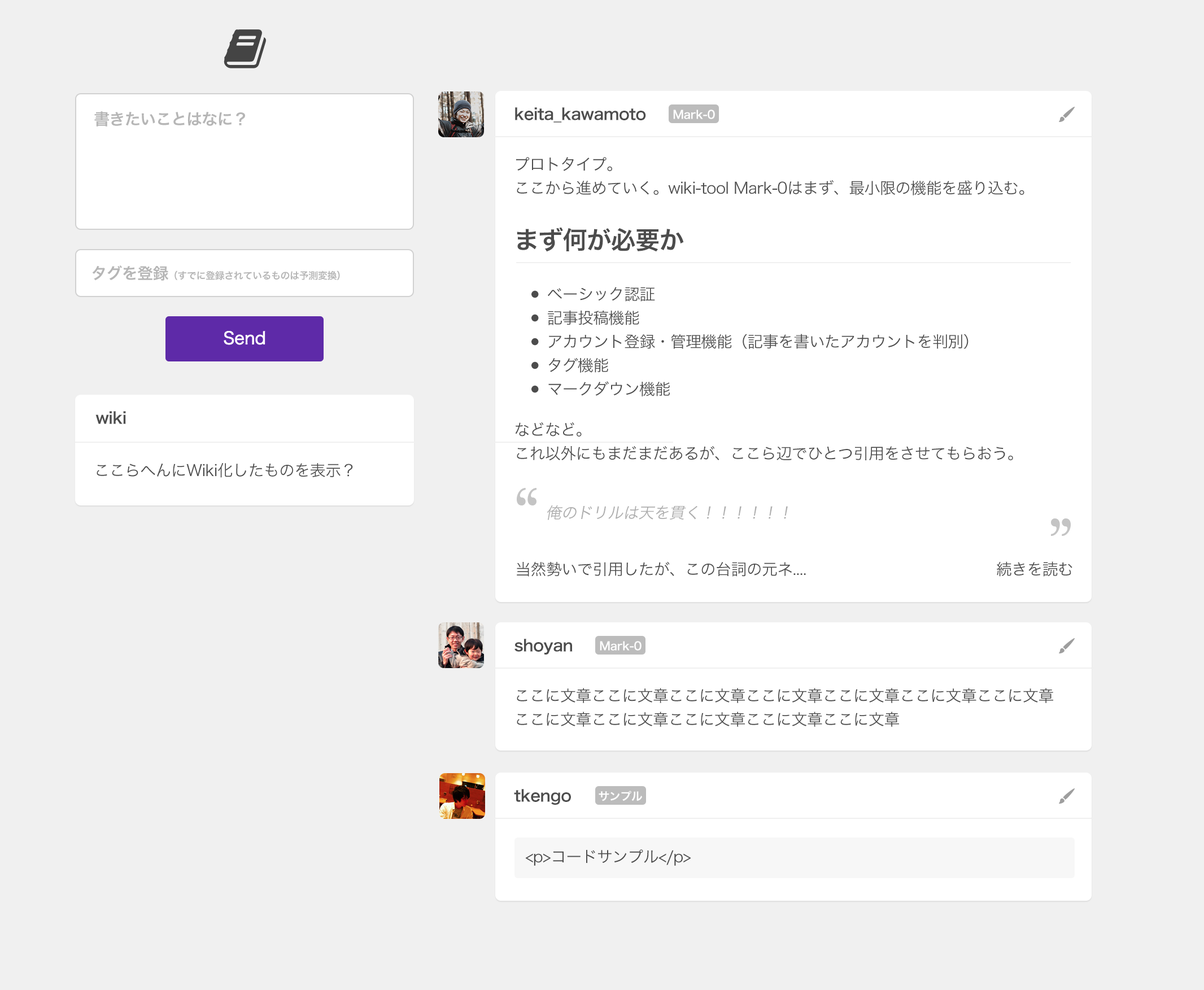
<style>
.page{position:relative;width:1204px;height:990px;background:#f0f0f0}
.page>*{position:absolute;margin:0}
.t1{font:15.8px "HiraKakuPro-W6";letter-spacing:-0.025em;color:#b6b6b6}
.t2{font:15.8px "HiraKakuPro-W6";letter-spacing:-0.025em;color:#4c4c4c}
.t3{font:11.3px "HiraKakuPro-W6";letter-spacing:-0.025em;color:#ffffff}
.t4{font:15.8px/23.7px "HiraKakuPro-W3";letter-spacing:-0.025em;color:#4c4c4c}
.t5{font:24.9px "HiraKakuPro-W6";letter-spacing:-0.025em;color:#4c4c4c}
.t6{font:9.6px "HiraKakuPro-W6";letter-spacing:-0.025em;color:#b6b6b6}
.t7{font:7.9px/23.7px "KozGoPr6N-Regular";letter-spacing:-0.025em;color:#4c4c4c}
.t8{font:15.8px "HiraKakuPro-W3";letter-spacing:-0.025em;color:#4c4c4c}
.t9{font:15.8px "HiraKakuPro-W3";letter-spacing:-0.025em;color:#aeaeae;font-style:italic}
</style>
<div class="page">
<p class="t1" style="left:94px;top:111px;width:151px;height:16px">書きたいことはなに？</p>
<p class="t2" style="left:515px;top:107px;width:131px;height:16px">keita_kawamoto</p>
<p class="t3" style="left:673px;top:110px;width:42px;height:9px">Mark-0</p>
<p class="t4" style="left:516px;top:157px;width:509px;height:38px">プロトタイプ。<br>ここから進めていく。wiki-tool Mark-0はまず、最小限の機能を盛り込む。</p>
<p class="t5" style="left:517px;top:227px;width:167px;height:25px">まず何が必要か</p>
<p class="t6" style="left:92px;top:265px;width:248px;height:16px"><span class="t1">タグを登録</span>（すでに登録されているものは予測変換）</p>
<p class="t4" style="left:532px;top:287px;width:437px;height:110px"><span class="t7">●     </span>ベーシック認証<br><span class="t7">●     </span>記事投稿機能<br><span class="t7">●     </span>アカウント登録・管理機能（記事を書いたアカウントを判別）<br><span class="t7">●     </span>タグ機能<br><span class="t7">●     </span>マークダウン機能</p>
<p class="t2" style="left:95px;top:411px;width:31px;height:13px">wiki</p>
<p class="t4" style="left:515px;top:422px;width:498px;height:39px">などなど。<br>これ以外にもまだまだあるが、ここら辺でひとつ引用をさせてもらおう。</p>
<p class="t8" style="left:97px;top:463px;width:256px;height:15px">ここらへんにWiki化したものを表示？</p>
<p class="t9" style="left:547px;top:505px;width:241px;height:15px">俺のドリルは天を貫く！！！！！！</p>
<p class="t8" style="left:517px;top:561px;width:556px;height:16px">当然勢いで引用したが、この台詞の元ネ....　　　　　 　　　　　　　続きを読む</p>
<p class="t2" style="left:515px;top:639px;width:58px;height:16px">shoyan</p>
<p class="t3" style="left:600px;top:641px;width:42px;height:10px">Mark-0</p>
<p class="t4" style="left:517px;top:688px;width:536px;height:39px">ここに文章ここに文章ここに文章ここに文章ここに文章ここに文章ここに文章<br>ここに文章ここに文章ここに文章ここに文章ここに文章</p>
<p class="t2" style="left:514px;top:789px;width:57px;height:16px">tkengo</p>
<p class="t3" style="left:599px;top:791px;width:43px;height:11px">サンプル</p>
<p class="t8" style="left:525px;top:850px;width:166px;height:16px">&lt;p&gt;コードサンプル&lt;/p&gt;</p>
</div>
